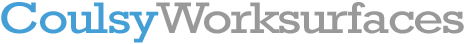
<style>
.page{position:relative;width:466px;height:44px;background:#ffffff}
.page>*{position:absolute;margin:0}
.t1{font:44.6px "Rockwell";letter-spacing:-0.04em;color:#999999;scale:1.19 1}
.t2{font:44.6px "Rockwell";letter-spacing:-0.04em;color:#449fd6;scale:1.19 1}
</style>
<div class="page">
<p class="t1" style="left:1px;top:2px;width:463px;height:41px"><span class="t2">Coulsy</span>Worksurfaces</p>
</div>
